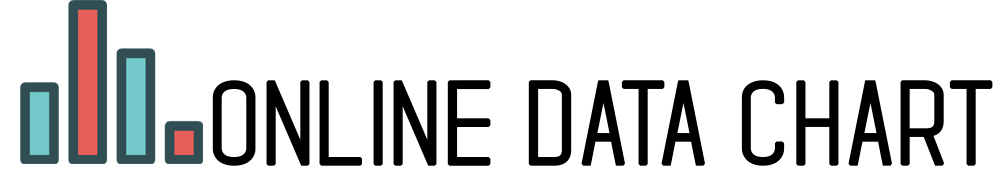
<style>
.page{position:relative;width:1000px;height:182px;background:#ffffff}
.page>*{position:absolute;margin:0}
.t1{font:113.8px "StandarisRegular";color:#000000;font-weight:bold;scale:1.11 1}
</style>
<div class="page">
<p class="t1" style="left:212px;top:80px;width:781px;height:86px">ONLINE DATA CHART</p>
</div>
